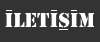
<style>
.page{position:relative;width:100px;height:42px;background:#333333}
.page>*{position:absolute;margin:0}
.t1{font:21.3px "Stencil";color:#ffffff}
</style>
<div class="page">
<p class="t1" style="left:5px;top:12px;width:90px;height:16px">iletisim</p>
</div>
